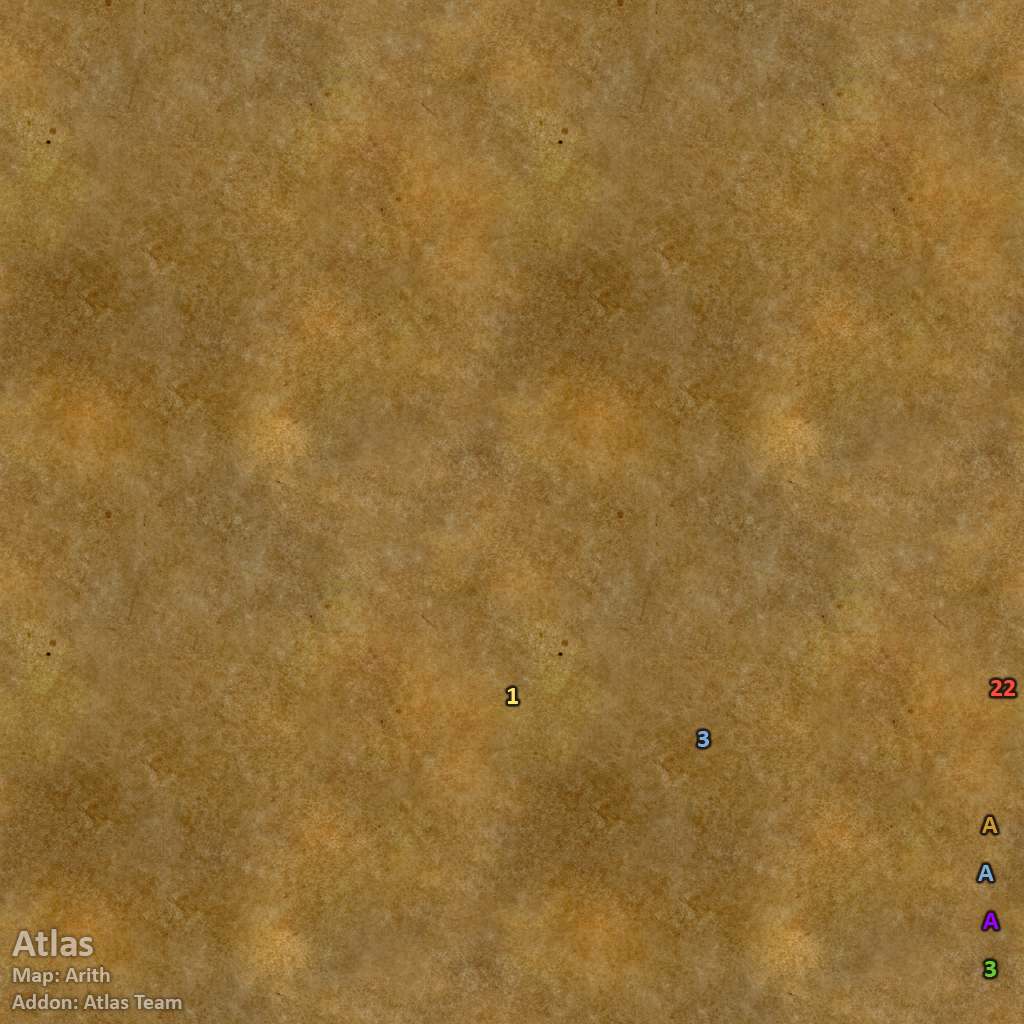
<style>
.page{position:relative;width:1024px;height:1024px}
.page>*{position:absolute;margin:0}
.t1{font:26px "Calibri-Bold";color:#fee570}
.t2{font:26px "Calibri-Bold";color:#ff4c3c}
.t3{font:26px "Calibri-Bold";color:#7babe0}
.t4{font:26px "Calibri-Bold";color:#cc9933}
.t5{font:26px "Calibri-Bold";color:#9900ff}
.t6{font:22px "Calibri-Bold";color:#c4b39b}
.t7{font:40px "Calibri-Bold";color:#c4b39b}
.t8{font:26px "Calibri-Bold";color:#66cc33}
</style>
<div class="page">
<p class="t1" style="left:507px;top:688px;width:11px;height:16px">1</p>
<p class="t2" style="left:991px;top:680px;width:25px;height:16px">22</p>
<p class="t3" style="left:698px;top:731px;width:11px;height:16px">3</p>
<p class="t4" style="left:982px;top:817px;width:16px;height:16px">A</p>
<p class="t3" style="left:978px;top:865px;width:16px;height:16px">A</p>
<p class="t5" style="left:983px;top:913px;width:16px;height:16px">A</p>
<p class="t6" style="left:12px;top:929px;width:170px;height:80px"><span class="t7">Atlas<br></span>Map: Arith<br>Addon: Atlas Team</p>
<p class="t8" style="left:985px;top:961px;width:11px;height:16px">3</p>
</div>
